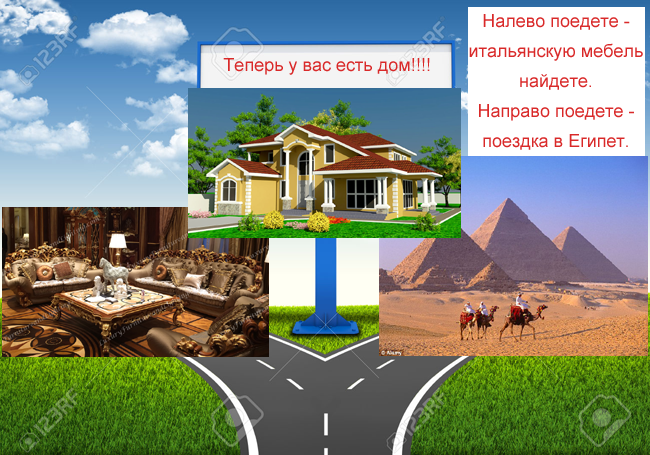
<style>
.page{position:relative;width:650px;height:455px}
.page>*{position:absolute;margin:0}
.t1{font:18px/30px "ArialMT";color:#d92929}
.t2{font:18px "ArialMT";color:#d92929}
</style>
<div class="page">
<p class="t1" style="left:469px;top:14px;width:174px;height:136px;text-align:center">Налево поедете - <br>итальянскую мебель<br>найдете.<br>Направо поедете -<br>поездка в Египет.</p>
<p class="t2" style="left:223px;top:58px;width:207px;height:17px">Теперь у вас есть дом!!!!</p>
</div>
